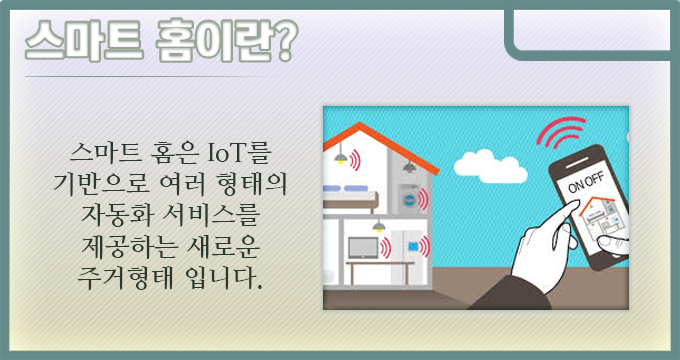
<style>
.page{position:relative;width:680px;height:360px}
.page>*{position:absolute;margin:0}
.t1{font:44px "KoreanTITGD5-R";letter-spacing:-0.01em;color:#ffffff}
.t2{font:26px "NanumMyeongjoBold";letter-spacing:-0.01em;color:#2a382e}
</style>
<div class="page">
<p class="t1" style="left:26px;top:19px;width:271px;height:42px">스마트 홈이란?</p>
<p class="t2" style="left:53px;top:140px;width:233px;height:151px;text-align:center">스마트 홈은 IoT를 기반으로 여러 형태의 자동화 서비스를 제공하는 새로운 주거형태 입니다.</p>
</div>
